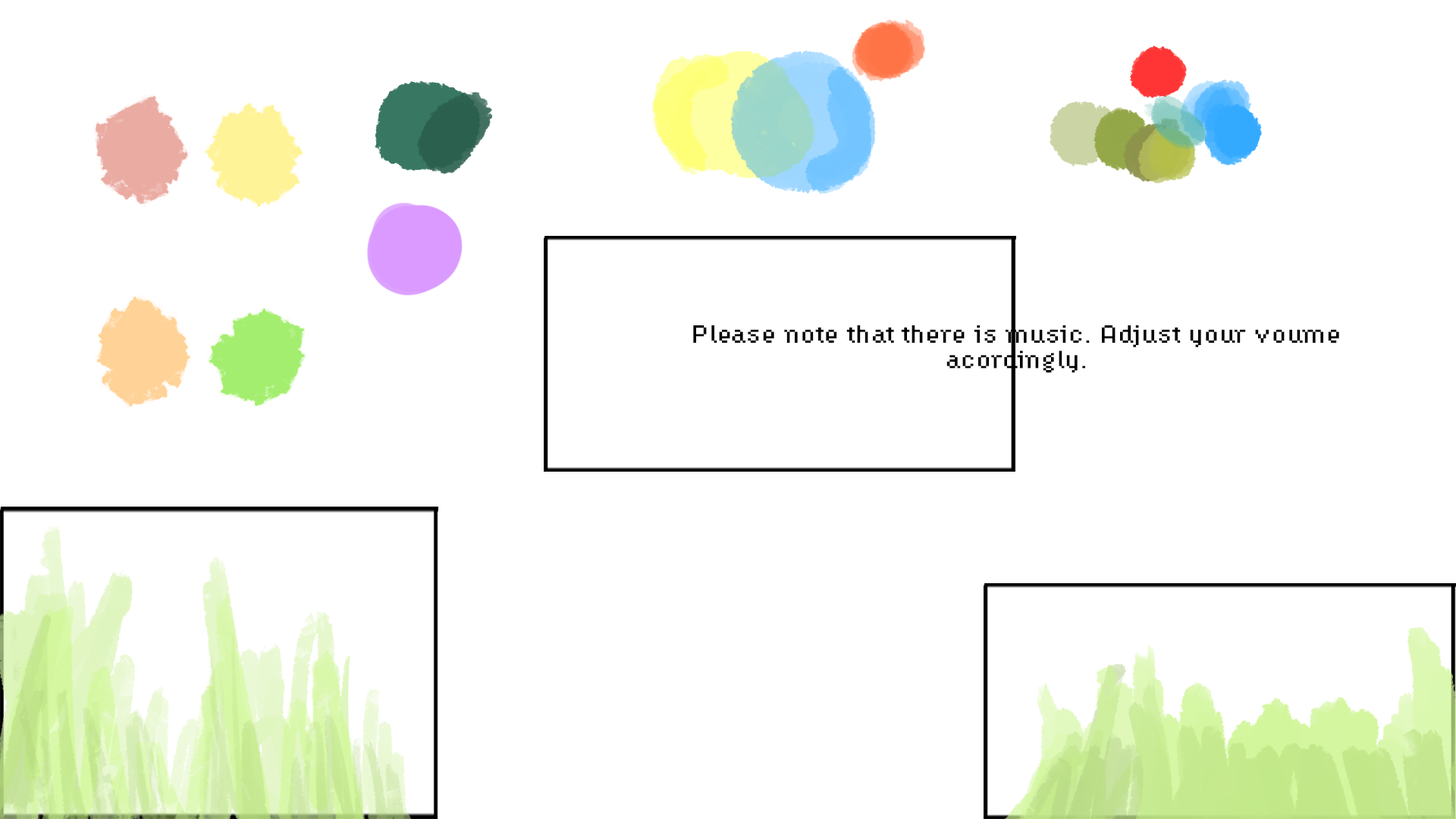
<style>
.page{position:relative;width:1456px;height:819px;background:#ffffff}
.page>*{position:absolute;margin:0}
.t1{font:23.7px "HydrophiliaIced";color:#000000;scale:1.21 1}
</style>
<div class="page">
<p class="t1" style="left:693px;top:325px;width:646px;height:48px;text-align:center">Please note that there is music. Adjust your voume acordingly.</p>
</div>
